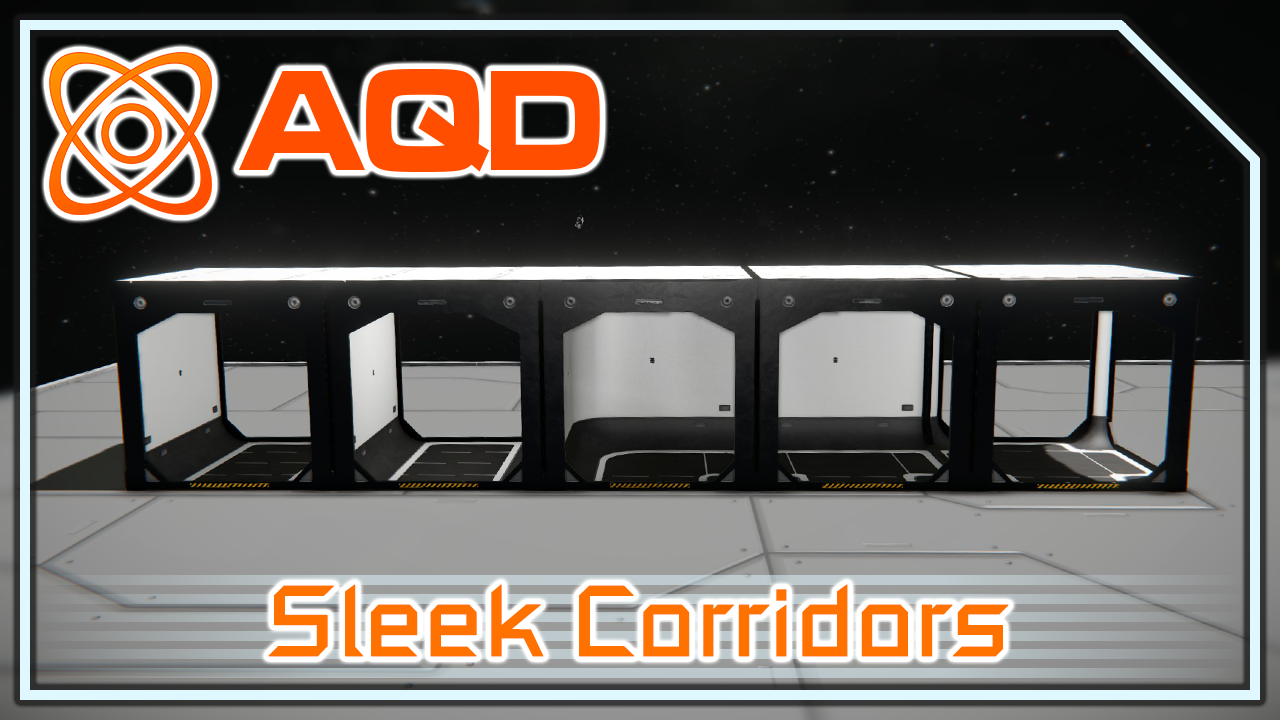
<style>
.page{position:relative;width:1280px;height:720px}
.page>*{position:absolute;margin:0}
.t1{font:148.7px "MicrogrammaD-BoldExte";color:#ff4e00;scale:0.83 1}
.t2{font:99px "SpaceEngineers";color:#ff7200;font-weight:bold}
</style>
<div class="page">
<p class="t1" style="left:238px;top:69px;width:362px;height:104px">AQD</p>
<p class="t2" style="left:268px;top:584px;width:741px;height:73px">Sleek Corridors</p>
</div>
